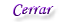
<style>
.page{position:relative;width:66px;height:22px;background:#ffffff}
.page>*{position:absolute;margin:0}
.t1{font:18px "MonotypeCorsiva"}
</style>
<div class="page">
<p class="t1" style="left:13px;top:4px;width:41px;height:12px">Cerrar</p>
</div>
